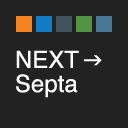
<style>
.page{position:relative;width:128px;height:128px;background:#222222}
.page>*{position:absolute;margin:0}
.t1{font:24px "Helvetica";color:#fafafa}
</style>
<div class="page">
<p class="t1" style="left:16px;top:50px;width:63px;height:18px">NEXT</p>
<p class="t1" style="left:16px;top:74px;width:62px;height:24px">Septa</p>
</div>
